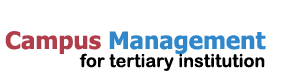
<style>
.page{position:relative;width:285px;height:82px;background:#ffffff}
.page>*{position:absolute;margin:0}
.t1{font:24px "Tahoma-Bold";color:#3087ca}
.t2{font:24px "Tahoma-Bold";color:#b13d4b}
.t3{font:18px "ArialRoundedMTBold";color:#000000}
</style>
<div class="page">
<p class="t1" style="left:5px;top:31px;width:261px;height:23px"><span class="t2">Campus </span>Management</p>
<p class="t3" style="left:79px;top:53px;width:186px;height:18px">for tertiary institution</p>
</div>
